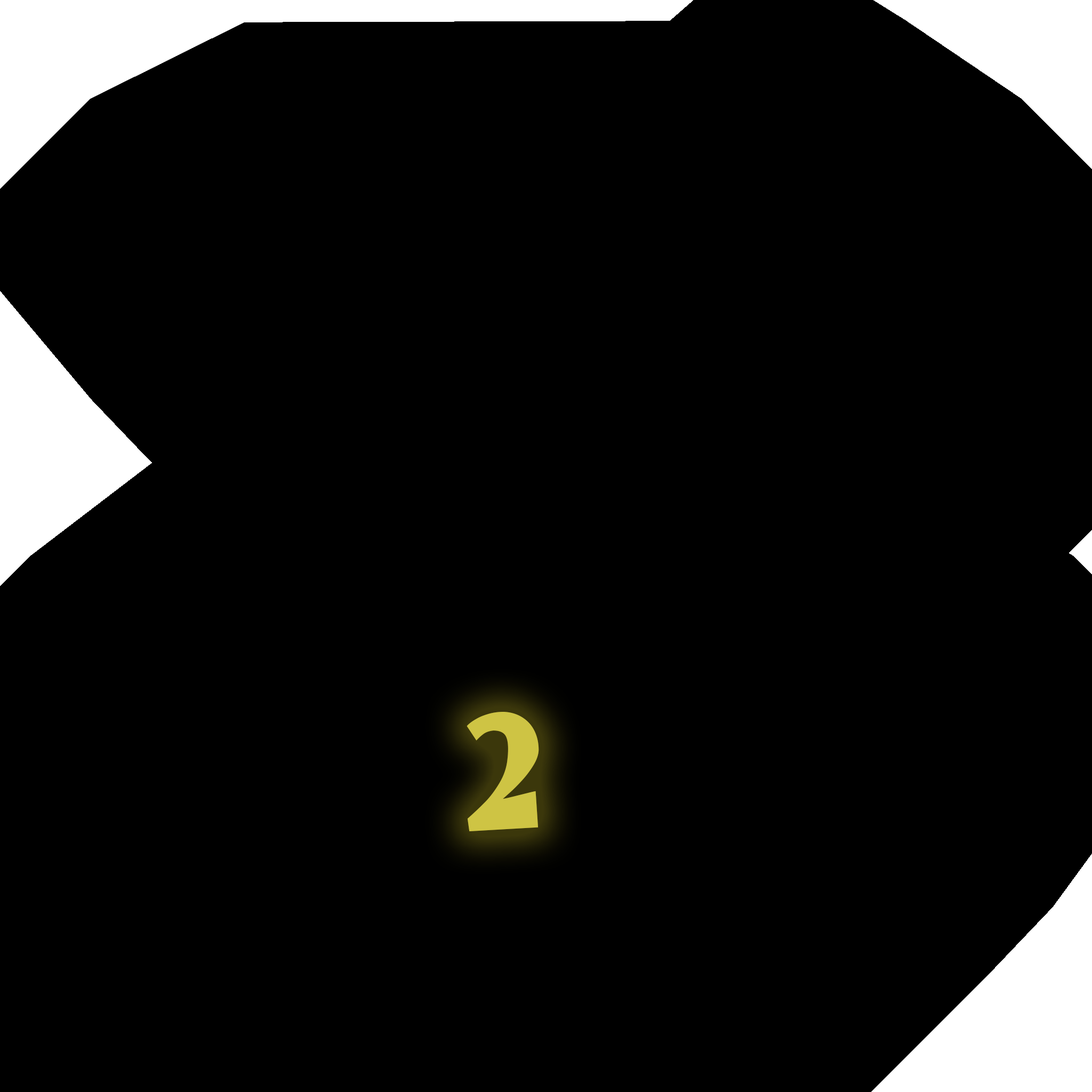
<style>
.page{position:relative;width:1092px;height:1092px;background:#000000}
.page>*{position:absolute;margin:0}
.t1{font:160px "WhimsyTT";color:#cec444}
</style>
<div class="page">
<p class="t1" style="left:467px;top:712px;width:72px;height:119px">2</p>
</div>
